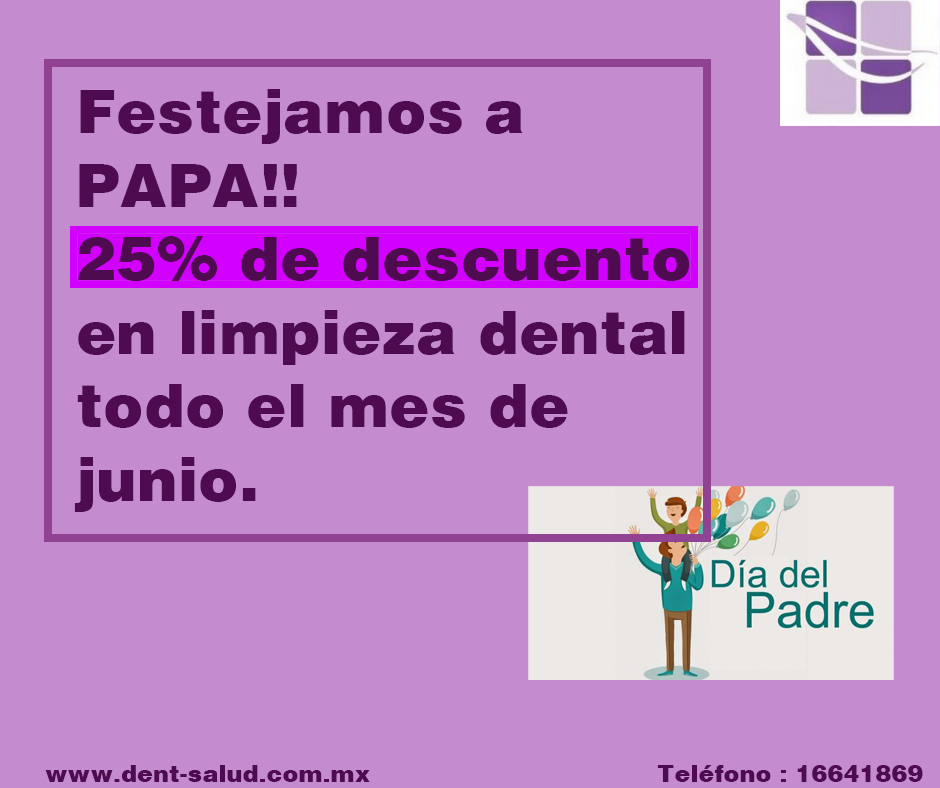
<style>
.page{position:relative;width:940px;height:788px;background:#c48cce}
.page>*{position:absolute;margin:0}
.t1{font:61.3px "Helvetica-Black";color:#4f0b50}
.t2{font:24px "Helvetica-Black";color:#4f0b50}
</style>
<div class="page">
<p class="t1" style="left:74px;top:89px;width:615px;height:423px">Festejamos a<br>PAPA!!<br>25% de descuento<br>en limpieza dental<br>todo el mes de<br>junio.</p>
<p class="t2" style="left:45px;top:765px;width:878px;height:17px">www.dent-salud.com.mx        Teléfono : 16641869</p>
</div>
